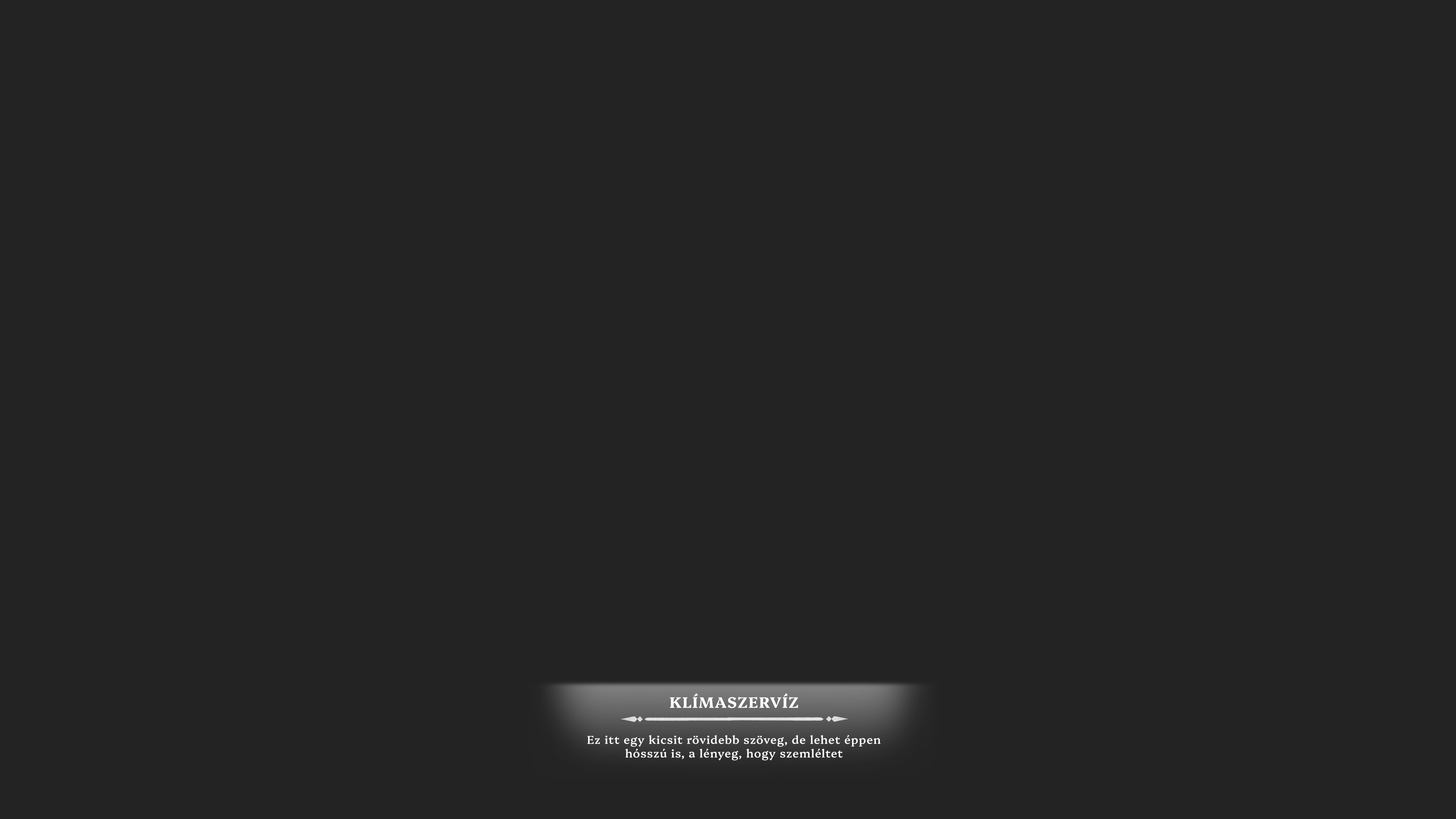
<style>
.page{position:relative;width:1456px;height:819px;background:#232323}
.page>*{position:absolute;margin:0}
.t1{font:15.2px "Platypi-Bold";letter-spacing:0.05em;color:#fffefe;text-transform:uppercase}
.t2{font:11.4px "Platypi-Medium";letter-spacing:0.05em;color:#ffffff}
</style>
<div class="page">
<p class="t1" style="left:670px;top:693px;width:128px;height:15px">Klímaszervíz</p>
<p class="t2" style="left:587px;top:735px;width:294px;height:26px;text-align:center">Ez itt egy kicsit rövidebb szöveg, de lehet éppen<br>hósszú is, a lényeg, hogy szemléltet</p>
</div>
